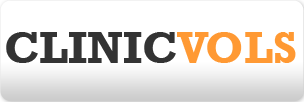
<style>
.page{position:relative;width:304px;height:102px;background:#ffffff}
.page>*{position:absolute;margin:0}
.t1{font:45px "Rockwell-Bold";color:#333333}
.t2{font:45px "Rockwell-Bold";color:#ff9933}
</style>
<div class="page">
<p class="t1" style="left:6px;top:32px;width:290px;height:31px">CLINIC<span class="t2">VOLS</span></p>
</div>
